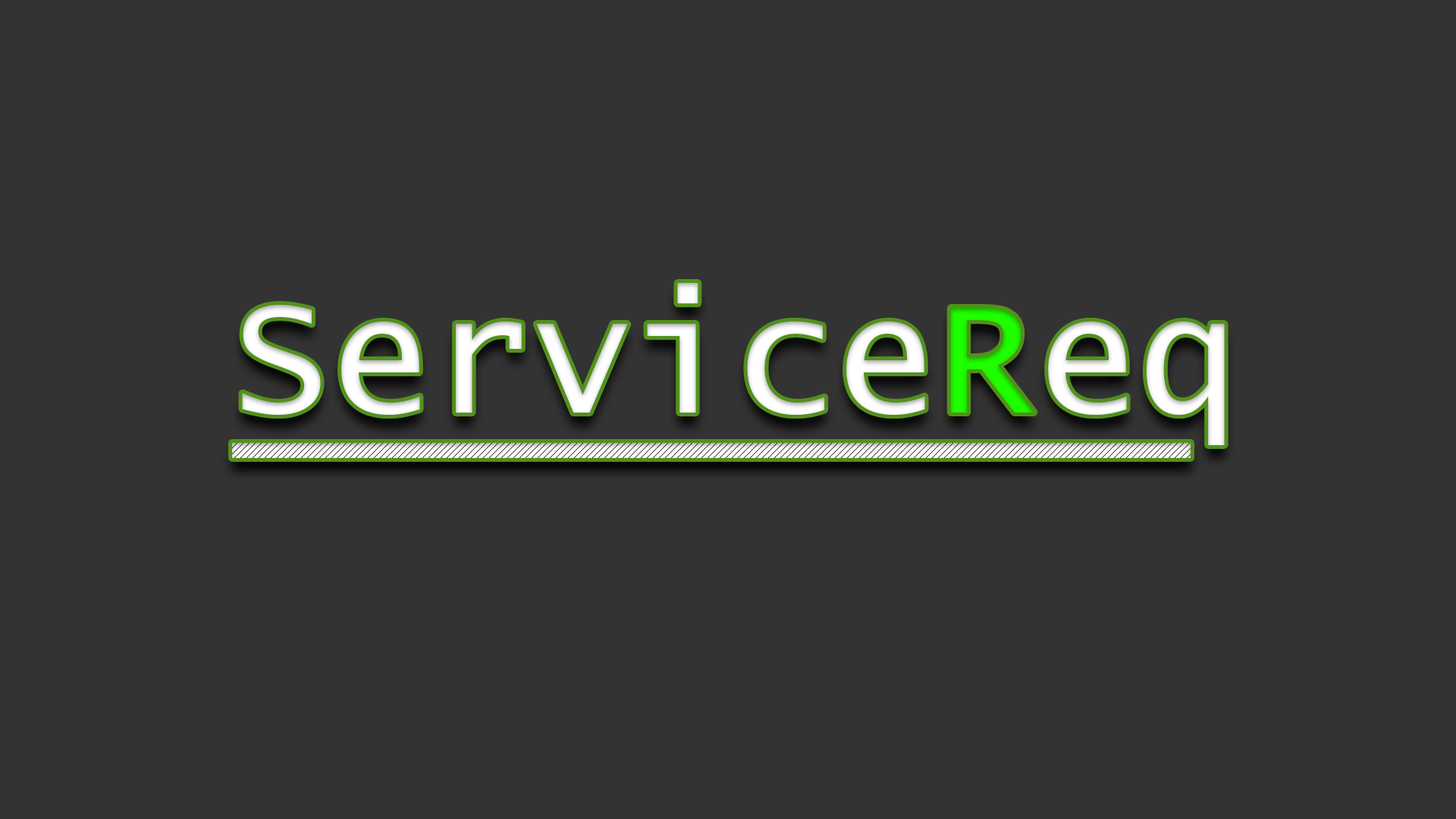
<style>
.page{position:relative;width:1456px;height:819px;background:#333333}
.page>*{position:absolute;margin:0}
.t1{font:167.6px "LucidaConsole";color:#ffffff}
.t2{font:167.6px "LucidaConsole";color:#1eff00}
</style>
<div class="page">
<p class="t1" style="left:242px;top:283px;width:983px;height:162px">Service<span class="t2">R</span>eq</p>
</div>
